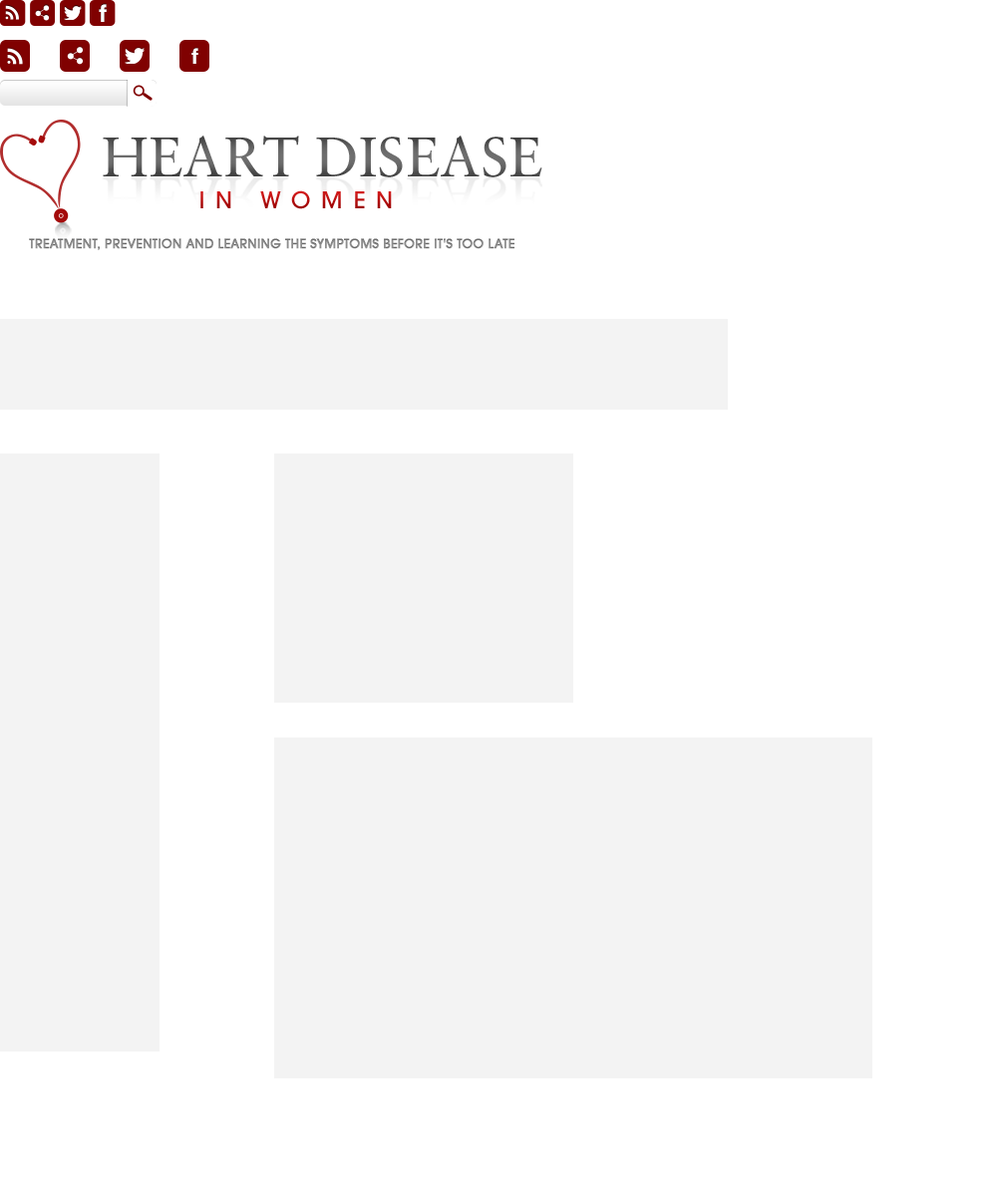
<style>
.page{position:relative;width:997px;height:1196px;background:#ffffff}
.page>*{position:absolute;margin:0}
.t1{font:23.9px "Helvetica-Bold";color:#ffffff}
.t2{font:21.1px "Helvetica-Bold";color:#ffffff}
.t3{font:55.8px "Sabon-Roman";color:#5c5c5c}
.t4{font:25.3px "AvantGardeMdITC";letter-spacing:0.42em}
.t5{font:14px "AvantGardeMdITC";color:#8d8d8d;text-transform:uppercase;font-weight:bold}
</style>
<div class="page">
<p class="t1" style="left:99px;top:4px;width:8px;height:18px">f</p>
<p class="t2" style="left:191px;top:48px;width:7px;height:16px">f</p>
<p class="t3" style="left:103px;top:136px;width:439px;height:41px">HEART DISEASE</p>
<p class="t4" style="left:200px;top:190px;width:192px;height:19px">IN WOMEN</p>
<p class="t5" style="left:29px;top:238px;width:485px;height:12px">treatment, prevention and learning the symptoms before it's too late</p>
</div>
